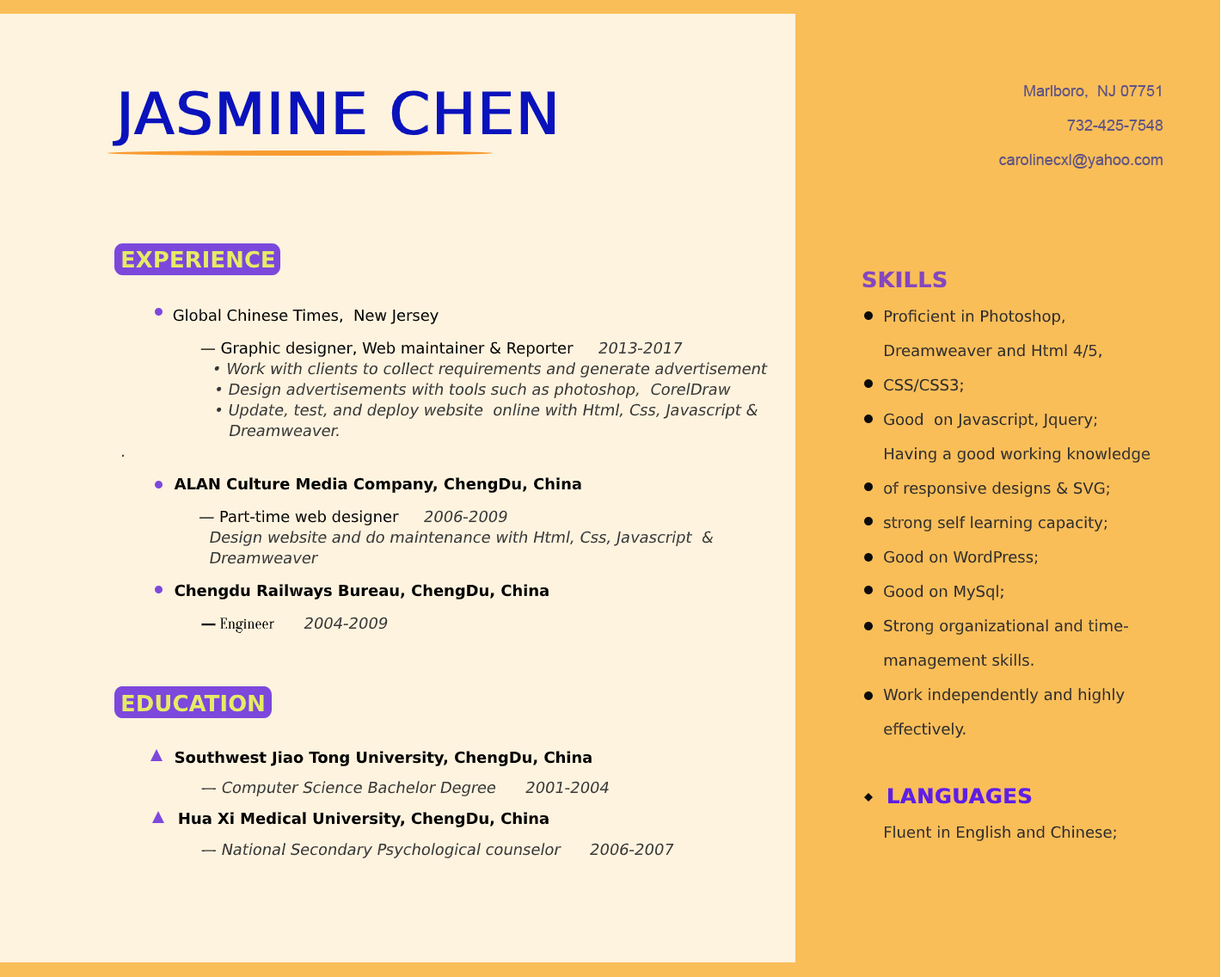
<style>
.page{position:relative;width:1221px;height:977px;background:#fef3df}
.page>*{position:absolute;margin:0}
.t1{font:15.5px/34.3px "ArialMT";color:#625482}
.t2{font:58.5px "MongolianBaiti";color:#0a12bc;font-weight:bold}
.t3{font:15.4px/20.6px "Century";color:#353535;font-style:italic}
.t4{font:22.4px/20.6px "ArialRoundedMTBold";color:#e6eb65}
.t5{font:15.4px/20.6px "Elephant-Regular";color:#000000}
.t6{font:15.4px/20.6px "FranklinGothic-Medium";color:#000000}
.t7{font:15.4px/20.6px "Century";color:#000000}
.t8{font:15.4px/32.7px "ArialRoundedMTBold";color:#000000}
.t9{font:15.4px/32.7px "Cambria";color:#000000}
.t10{font:15.4px/32.7px "Centaur";color:#353535;font-style:italic}
.t11{font:22.4px/51.6px "ArialRoundedMTBold";color:#e6eb65}
.t12{font:15.4px/51.6px "ArialRoundedMTBold";color:#000000}
.t13{font:15.4px/30.8px "Century";color:#353535;font-style:italic}
.t14{font:15.4px/30.8px "ArialRoundedMTBold";color:#000000}
.t15{font:15.5px/34.4px "Century";color:#2b2a2c}
.t16{font:21.5px/34.4px "ArialRoundedMTBold";color:#8447bd;font-weight:bold}
.t17{font:20.6px/34.4px "ArialRoundedMTBold";color:#5e1ee6;font-weight:bold}
</style>
<div class="page">
<p class="t1" style="left:999px;top:85px;width:164px;height:84px;text-align:right">Marlboro,  NJ 07751<br>732-425-7548<br>carolinecxl@yahoo.com</p>
<p class="t2" style="left:113px;top:90px;width:442px;height:56px">JASMINE CHEN</p>
<p class="t3" style="left:121px;top:250px;width:647px;height:608px"><span class="t4">EXPERIENCE<br><br>     </span><span class="t5">Global Chinese Times,  New Jersey        <br>              </span><span class="t6"> — </span><span class="t7">Graphic designer, Web maintainer &amp; Reporter     </span>2013-2017<br>        • Work with clients to collect requirements and generate advertisement   <br>                   • Design advertisements with tools such as photoshop,  CorelDraw  <br>                   • Update, test, and deploy website  online with Html, Css, Javascript &amp;  <br>                      Dreamweaver.<br>.<br> <span class="t8">ALAN Culture Media Company, ChengDu, China<br>               </span><span class="t7">— Part-time web designer   </span>  2006-2009<br>                  Design website and do maintenance with Html, Css, Javascript  &amp; <br>                  Dreamweaver<br> <span class="t8">Chengdu Railways Bureau, ChengDu, China<br>               — </span><span class="t9">Engineer      </span><span class="t10">2004-2009<br><br></span><span class="t11">EDUCATION  <br> </span><span class="t12">Southwest Jiao Tong University, ChengDu, China<br>               </span><span class="t13">— Computer Science Bachelor Degree      2001-2004<br>      </span><span class="t14">Hua Xi Medical University, ChengDu, China   <br>               </span><span class="t13">— National Secondary Psychological counselor      2006-2007</span></p>
<p class="t15" style="left:862px;top:271px;width:288px;height:570px"><span class="t16">SKILLS<br></span>Proficient in Photoshop, Dreamweaver and Html 4/5, CSS/CSS3;<br>Good  on Javascript, Jquery;<br>Having a good working knowledge of responsive designs &amp; SVG;<br>strong self learning capacity;<br>Good on WordPress;<br>Good on MySql;<br>Strong organizational and time-<br>management skills.<br>Work independently and highly  <br>effectively.<br><br>   <span class="t17">LANGUAGES<br></span>Fluent in English and Chinese;</p>
</div>
